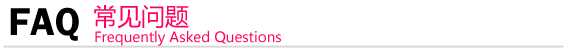
<style>
.page{position:relative;width:567px;height:50px;background:#ffffff}
.page>*{position:absolute;margin:0}
.t1{font:24px "MicrosoftYaHei";color:#ff0261}
.t2{font:40px "FranklinGothic-Demi";color:#000000}
.t3{font:14px "MicrosoftYaHei";color:#ff0261}
</style>
<div class="page">
<p class="t1" style="left:94px;top:5px;width:95px;height:24px">常见问题</p>
<p class="t2" style="left:10px;top:7px;width:69px;height:34px">FAQ</p>
<p class="t3" style="left:95px;top:30px;width:186px;height:16px">Frequently Asked Questions</p>
</div>
